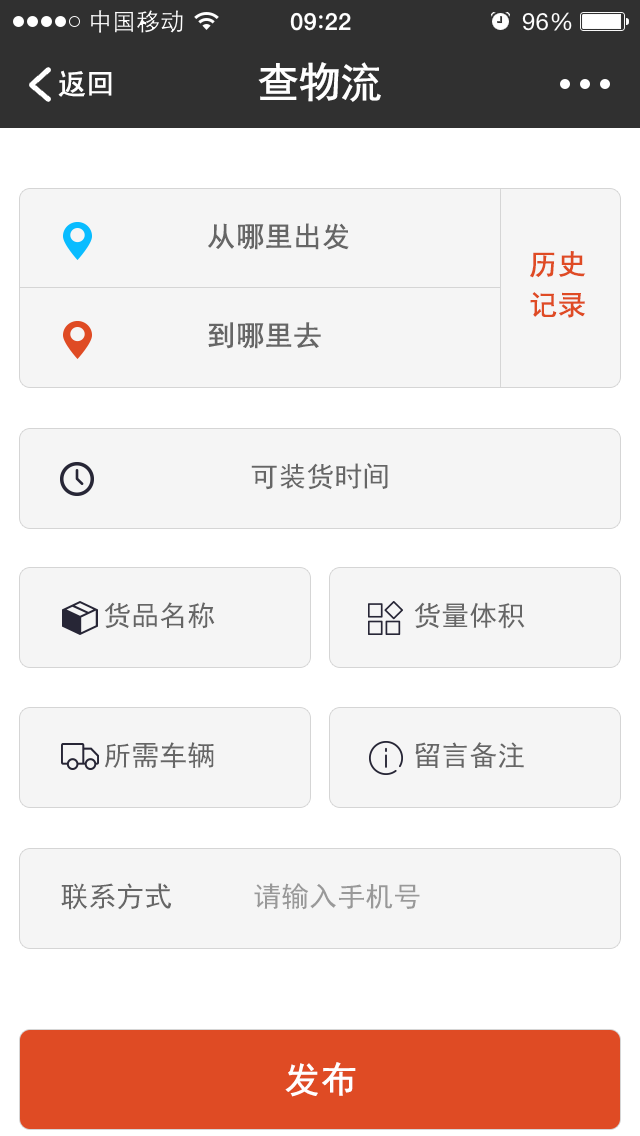
<style>
.page{position:relative;width:640px;height:1136px;background:#f5f5f5}
.page>*{position:absolute;margin:0}
.t1{font:42px "SimHei";letter-spacing:-0.04em;color:#ffffff;font-weight:bold}
.t2{font:28px "SimHei";color:#ffffff;font-weight:bold}
.t3{font:28px "SimHei";color:#666666;font-weight:bold}
.t4{font:28px/40.3px "SimHei";color:#df4b24;font-weight:bold}
.t5{font:28px "SimHei";color:#666666}
.t6{font:28px "SimHei";color:#999999}
.t7{font:36px "SimHei";color:#ffffff;font-weight:bold}
</style>
<div class="page">
<p class="t1" style="left:258px;top:62px;width:123px;height:40px">查物流</p>
<p class="t2" style="left:58px;top:70px;width:54px;height:27px">返回</p>
<p class="t3" style="left:208px;top:223px;width:141px;height:27px">从哪里出发</p>
<p class="t4" style="left:530px;top:251px;width:56px;height:67px">历史<br>记录</p>
<p class="t3" style="left:208px;top:322px;width:113px;height:27px">到哪里去</p>
<p class="t5" style="left:251px;top:463px;width:137px;height:27px">可装货时间</p>
<p class="t5" style="left:104px;top:602px;width:111px;height:27px">货品名称</p>
<p class="t5" style="left:414px;top:602px;width:111px;height:27px">货量体积</p>
<p class="t5" style="left:104px;top:742px;width:110px;height:26px">所需车辆</p>
<p class="t5" style="left:415px;top:742px;width:109px;height:26px">留言备注</p>
<p class="t5" style="left:61px;top:883px;width:111px;height:27px">联系方式</p>
<p class="t6" style="left:254px;top:883px;width:166px;height:27px">请输入手机号</p>
<p class="t7" style="left:285px;top:1062px;width:71px;height:35px">发布</p>
</div>
